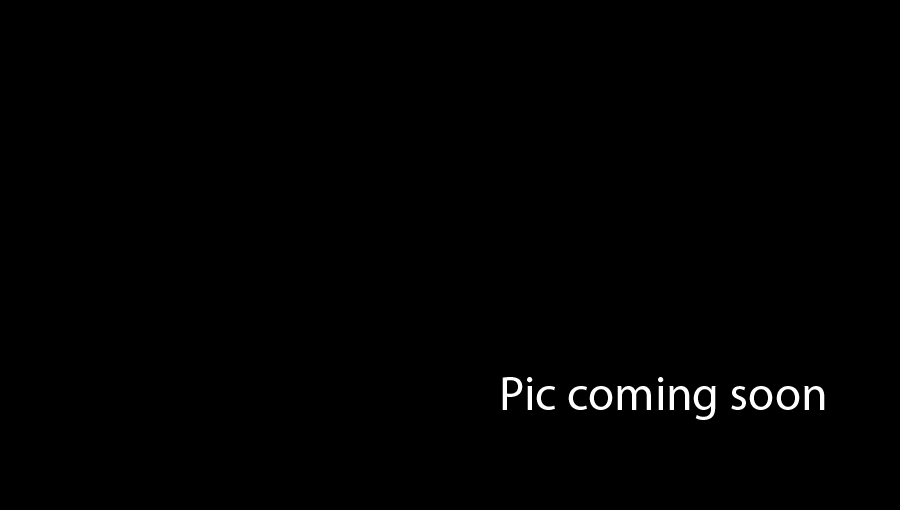
<style>
.page{position:relative;width:900px;height:510px;background:#000000}
.page>*{position:absolute;margin:0}
.t1{font:48px "MyriadPro-Regular";color:#ffffff}
</style>
<div class="page">
<p class="t1" style="left:502px;top:377px;width:323px;height:43px">Pic coming soon</p>
</div>
